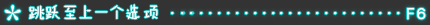
<style>
.page{position:relative;width:430px;height:25px;background:#333333}
.page>*{position:absolute;margin:0}
.t1{font:18px "¢è?";color:#ffffff}
</style>
<div class="page">
<p class="t1" style="left:29px;top:4px;width:129px;height:16px">跳跃至上一个选项</p>
</div>
